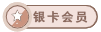
<style>
.page{position:relative;width:101px;height:32px;background:#ffffff}
.page>*{position:absolute;margin:0}
.t1{font:12px "SimHei";letter-spacing:0.2em;color:#89685c;font-weight:bold}
</style>
<div class="page">
<p class="t1" style="left:33px;top:11px;width:55px;height:12px">银卡会员</p>
</div>
